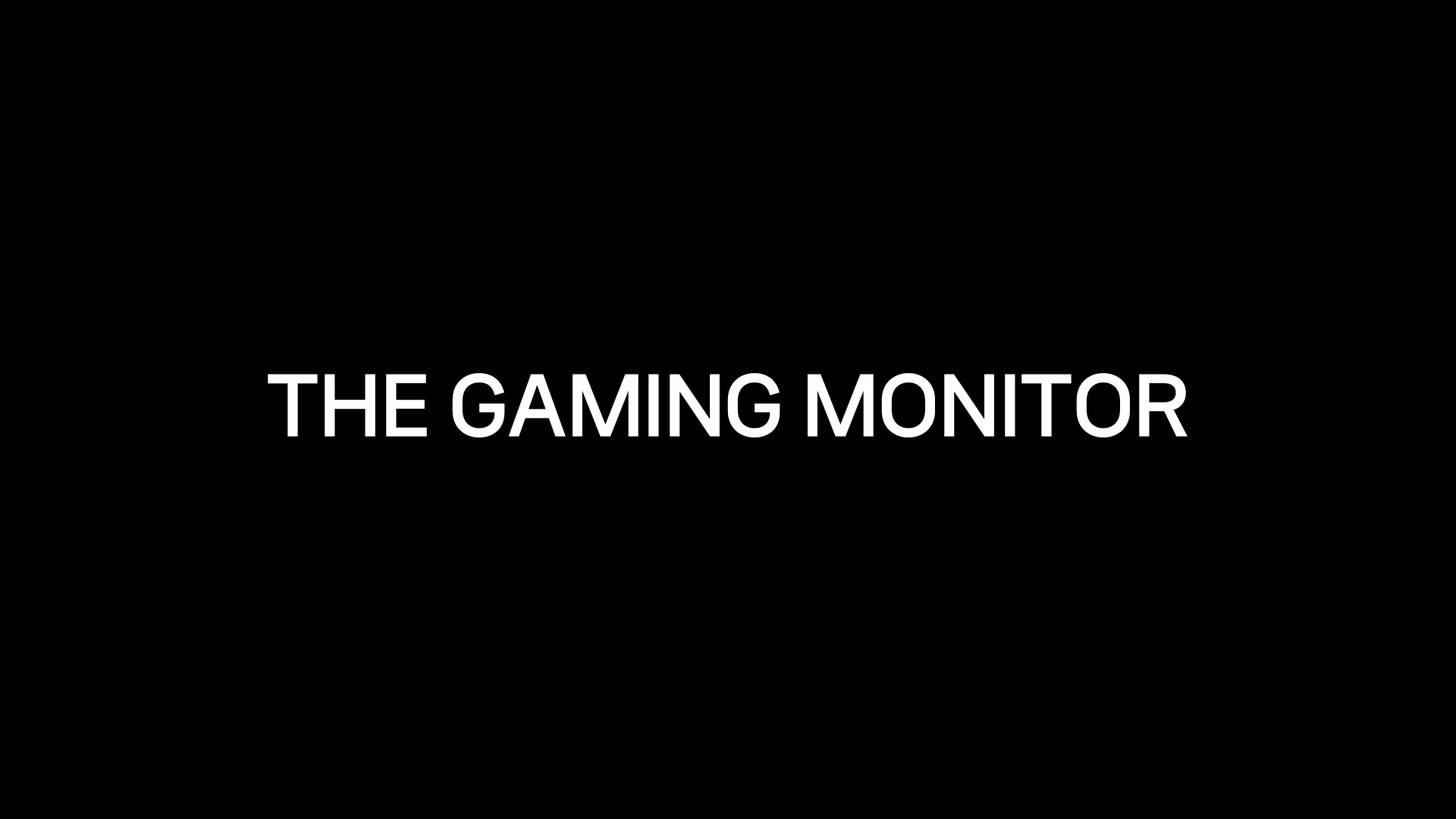
<style>
.page{position:relative;width:1456px;height:819px;background:#000000}
.page>*{position:absolute;margin:0}
.t1{font:75.9px "NanumSquareNeo-dEb";color:#ffffff}
</style>
<div class="page">
<p class="t1" style="left:268px;top:373px;width:920px;height:65px">THE GAMING MONITOR</p>
</div>
